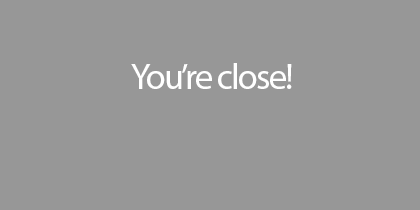
<style>
.page{position:relative;width:420px;height:210px;background:#979797}
.page>*{position:absolute;margin:0}
.t1{font:36px "MyriadPro-Regular";letter-spacing:-0.05em;color:#ffffff}
</style>
<div class="page">
<p class="t1" style="left:131px;top:63px;width:161px;height:26px">You’re close!</p>
</div>
